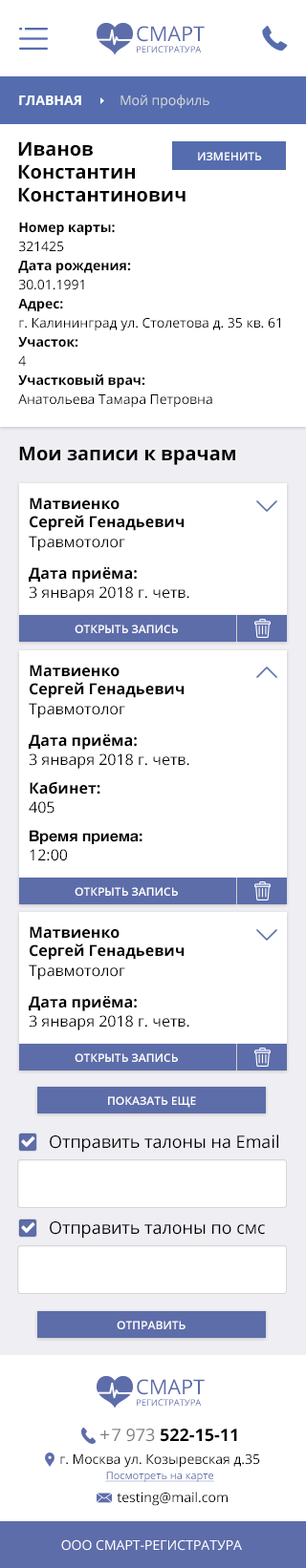
<style>
.page{position:relative;width:306px;height:1568px;background:#ffffff}
.page>*{position:absolute;margin:0}
.t1{font:8.9px/11px "OpenSans";color:#5d6daa}
.t2{font:20.6px/11px "OpenSans";color:#5d6daa}
.t3{font:13.4px "OpenSans";color:#d8d8d8}
.t4{font:13.4px "OpenSans-Bold";color:#ffffff}
.t5{font:19.1px/22.9px "OpenSans-Bold";color:#000000}
.t6{font:11.5px "OpenSans-Semibold";color:#ffffff;text-transform:uppercase}
.t7{font:13.4px/19.1px "OpenSans";color:#000000}
.t8{font:13.4px/19.1px "OpenSans-Bold";color:#000000}
.t9{font:19.1px "OpenSans-Bold";color:#000000}
.t10{font:15.3px "OpenSans-Bold";color:#000000}
.t11{font:15.3px "OpenSans";color:#000000}
.t12{font:15.3px "HelveticaNeue-Bold";color:#000000}
.t13{font:17.2px "OpenSans";color:#000000}
.t14{font:17.2px "HelveticaNeue";color:#7b7b81}
.t15{font:17.2px "OpenSans-Bold";color:#000000}
.t16{font:17.2px "OpenSans";color:#7b7b81}
.t17{font:13.4px/13.4px "OpenSans";color:#000000}
.t18{font:10.5px/15.3px "OpenSans";color:#5d6daa;text-decoration:underline}
.t19{font:13.4px "OpenSans";color:#000000}
.t20{font:13.4px "OpenSans";color:#ffffff}
</style>
<div class="page">
<p class="t1" style="left:137px;top:26px;width:67px;height:27px"><span class="t2">CМАРТ<br></span>РЕГИСТРАТУРА</p>
<p class="t3" style="left:19px;top:95px;width:190px;height:14px"><span class="t4">ГЛАВНАЯ          </span>Мой профиль</p>
<p class="t5" style="left:18px;top:141px;width:167px;height:61px">Иванов<br>Константин<br>Константинович</p>
<p class="t6" style="left:198px;top:152px;width:64px;height:8px">ИЗМЕНИТЬ</p>
<p class="t7" style="left:18px;top:222px;width:262px;height:186px"><span class="t8">Номер карты: </span> <br>321425<br><span class="t8">Дата рождения: <br></span>30.01.1991<br><span class="t8">Адрес: </span>  <br>г. Калининград ул. Столетова д. 35 кв. 61<br><span class="t8">Участок: </span>  <br>4<br><span class="t8">Участковый врач:</span> <br>Анатольева Тамара Петровна</p>
<p class="t9" style="left:19px;top:446px;width:216px;height:19px">Мои записи к врачам</p>
<p class="t10" style="left:30px;top:498px;width:154px;height:33px">Матвиенко<br>Сергей Генадьевич</p>
<p class="t11" style="left:29px;top:536px;width:96px;height:15px">Травмотолог</p>
<p class="t10" style="left:29px;top:567px;width:108px;height:16px">Дата приёма:</p>
<p class="t11" style="left:29px;top:586px;width:160px;height:16px">3 января 2018 г. четв.</p>
<p class="t6" style="left:74px;top:625px;width:104px;height:8px">ОТКРЫТЬ ЗАПИСЬ</p>
<p class="t10" style="left:30px;top:665px;width:154px;height:33px">Матвиенко<br>Сергей Генадьевич</p>
<p class="t11" style="left:29px;top:703px;width:96px;height:15px">Травмотолог</p>
<p class="t10" style="left:29px;top:734px;width:108px;height:16px">Дата приёма:</p>
<p class="t11" style="left:29px;top:753px;width:160px;height:16px">3 января 2018 г. четв.</p>
<p class="t10" style="left:30px;top:781px;width:70px;height:14px">Кабинет:</p>
<p class="t11" style="left:29px;top:801px;width:25px;height:13px">405</p>
<p class="t12" style="left:30px;top:830px;width:112px;height:14px">Время приема:</p>
<p class="t11" style="left:30px;top:849px;width:37px;height:12px">12:00</p>
<p class="t6" style="left:74px;top:887px;width:104px;height:9px">ОТКРЫТЬ ЗАПИСЬ</p>
<p class="t10" style="left:30px;top:926px;width:154px;height:34px">Матвиенко<br>Сергей Генадьевич</p>
<p class="t11" style="left:29px;top:964px;width:96px;height:16px">Травмотолог</p>
<p class="t10" style="left:29px;top:996px;width:108px;height:15px">Дата приёма:</p>
<p class="t11" style="left:29px;top:1015px;width:160px;height:15px">3 января 2018 г. четв.</p>
<p class="t6" style="left:74px;top:1053px;width:104px;height:9px">ОТКРЫТЬ ЗАПИСЬ</p>
<p class="t6" style="left:108px;top:1096px;width:88px;height:12px">ПОКАЗАТЬ ЕЩЕ</p>
<p class="t13" style="left:50px;top:1134px;width:228px;height:19px">Отправить талоны на Email</p>
<p class="t13" style="left:50px;top:1221px;width:215px;height:18px">Отправить талоны по смс</p>
<p class="t6" style="left:117px;top:1321px;width:68px;height:8px">ОТПРАВИТЬ</p>
<p class="t1" style="left:137px;top:1379px;width:67px;height:27px"><span class="t2">CМАРТ<br></span>РЕГИСТРАТУРА</p>
<p class="t14" style="left:100px;top:1430px;width:10px;height:9px">+</p>
<p class="t15" style="left:112px;top:1429px;width:125px;height:13px"><span class="t13">  </span><span class="t16">7 973 </span>522-15-11</p>
<p class="t17" style="left:60px;top:1453px;width:200px;height:29px;text-align:center">г. Москва ул. Козыревская д.35<br><span class="t18">Посмотреть на карте</span></p>
<p class="t19" style="left:117px;top:1492px;width:110px;height:14px">testing@mail.com</p>
<p class="t20" style="left:61px;top:1539px;width:181px;height:12px">ООО СМАРТ-РЕГИСТРАТУРА</p>
</div>
